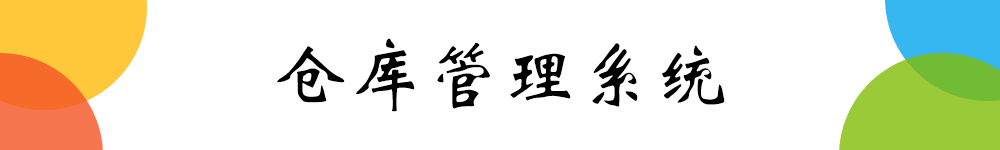
<style>
.page{position:relative;width:1000px;height:150px;background:#ffffff}
.page>*{position:absolute;margin:0}
.t1{font:76.2px "STXinwei";color:#000000}
</style>
<div class="page">
<p class="t1" style="left:277px;top:38px;width:448px;height:74px">仓库管理系统</p>
</div>
